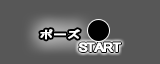
<style>
.page{position:relative;width:160px;height:64px;background:#575757}
.page>*{position:absolute;margin:0}
.t1{font:10.2px "HGPGothicE";letter-spacing:0.1em;color:#ffffff;font-weight:bold;scale:1.24 1}
.t2{font:11.1px "HGPGothicE";letter-spacing:-0.16em;color:#ffffff;font-weight:bold;scale:1.57 1}
</style>
<div class="page">
<p class="t1" style="left:40px;top:29px;width:40px;height:11px">ポーズ</p>
<p class="t2" style="left:78px;top:42px;width:43px;height:10px">START</p>
</div>
